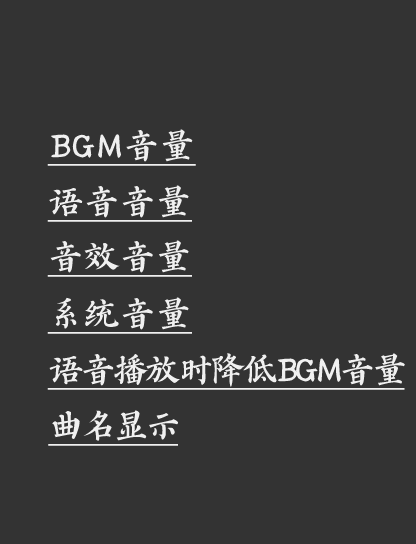
<style>
.page{position:relative;width:416px;height:544px;background:#333333}
.page>*{position:absolute;margin:0}
.t1{font:36px "AaYZQDBTBNon-CommercialUse";color:#f0f0f0;text-decoration:underline}
.t2{font:36px "AaYZQDBTBNon-CommercialUse";letter-spacing:-0.1em;color:#f0f0f0;text-decoration:underline}
</style>
<div class="page">
<p class="t1" style="left:47px;top:129px;width:149px;height:37px">BGM音量</p>
<p class="t1" style="left:47px;top:185px;width:145px;height:37px">语音音量</p>
<p class="t1" style="left:47px;top:240px;width:145px;height:37px">音效音量</p>
<p class="t1" style="left:47px;top:297px;width:145px;height:37px">系统音量</p>
<p class="t2" style="left:47px;top:353px;width:358px;height:37px">语音播放时降低BGM音量</p>
<p class="t2" style="left:48px;top:410px;width:130px;height:36px">曲名显示</p>
</div>
